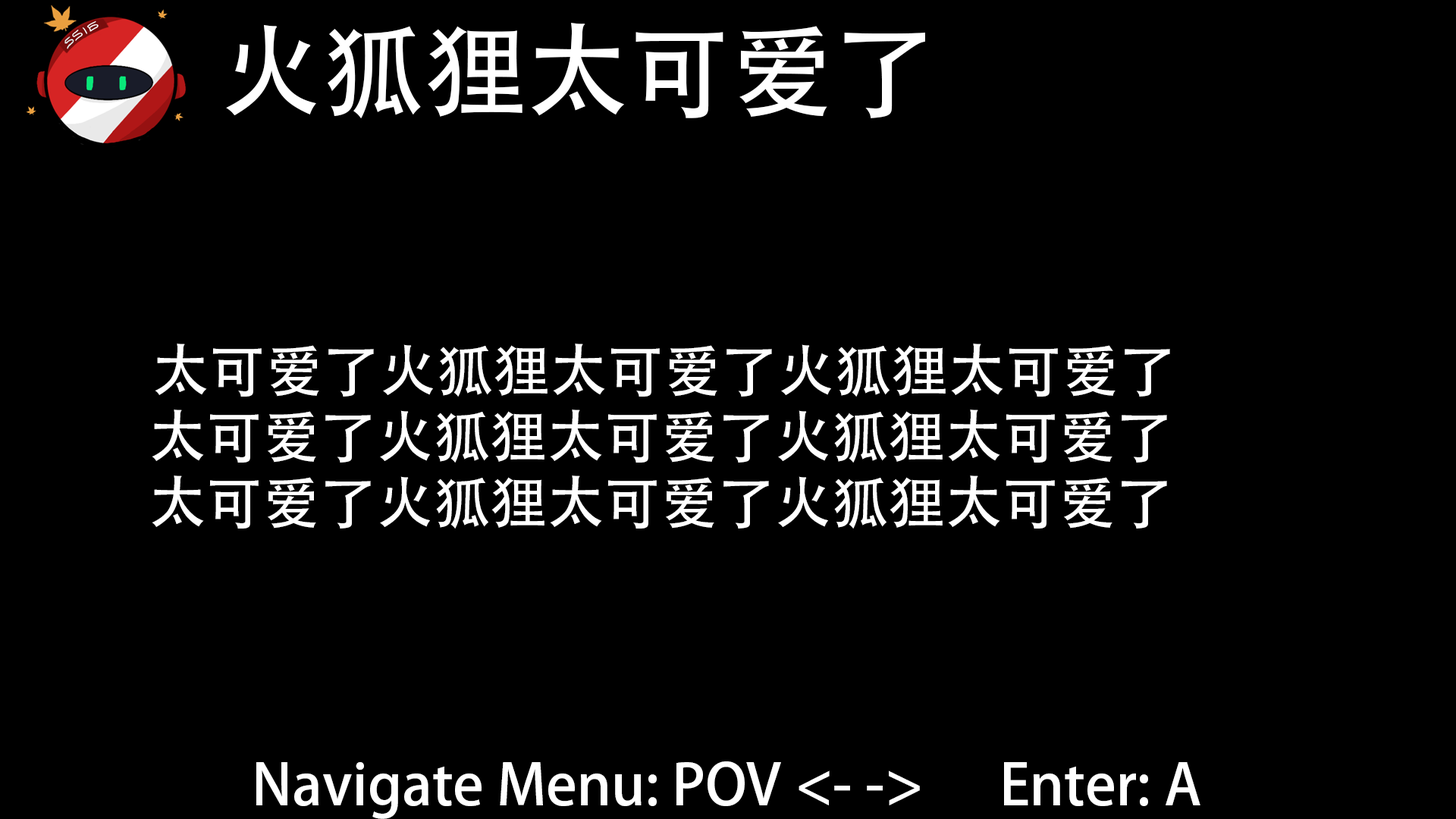
<style>
.page{position:relative;width:1456px;height:819px;background:#000000}
.page>*{position:absolute;margin:0}
.t1{font:102.3px "AdobeHeitiStd-Regular";color:#ffffff}
.t2{font:56.9px "AdobeHeitiStd-Regular";color:#ffffff}
</style>
<div class="page">
<p class="t1" style="left:226px;top:23px;width:699px;height:95px">火狐狸太可爱了</p>
<p class="t2" style="left:155px;top:344px;width:1015px;height:53px">太可爱了火狐狸太可爱了火狐狸太可爱了</p>
<p class="t2" style="left:152px;top:409px;width:1015px;height:54px">太可爱了火狐狸太可爱了火狐狸太可爱了</p>
<p class="t2" style="left:152px;top:475px;width:1015px;height:54px">太可爱了火狐狸太可爱了火狐狸太可爱了</p>
<p class="t2" style="left:256px;top:761px;width:944px;height:58px">Navigate Menu: POV &lt;- -&gt;      Enter: A</p>
</div>
